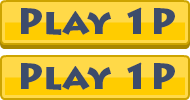
<style>
.page{position:relative;width:190px;height:100px;background:#ffd948}
.page>*{position:absolute;margin:0}
.t1{font:36px "LithosPro-Black";color:#3d4c6b}
</style>
<div class="page">
<p class="t1" style="left:21px;top:7px;width:154px;height:28px">Play 1P</p>
<p class="t1" style="left:21px;top:62px;width:154px;height:28px">Play 1P</p>
</div>
